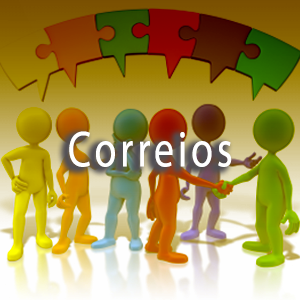
<style>
.page{position:relative;width:300px;height:300px}
.page>*{position:absolute;margin:0}
.t1{font:50.7px "MyriadPro-Regular";letter-spacing:0.1em;color:#ffffff;scale:0.78 1}
</style>
<div class="page">
<p class="t1" style="left:69px;top:131px;width:163px;height:36px">Correios</p>
</div>
